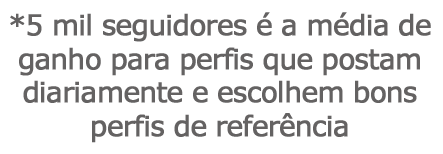
<style>
.page{position:relative;width:443px;height:154px;background:#ffffff}
.page>*{position:absolute;margin:0}
.t1{font:27.9px "Verdana";letter-spacing:-0.05em;color:#646262;font-weight:bold}
</style>
<div class="page">
<p class="t1" style="left:10px;top:12px;width:421px;height:131px;text-align:center">*5 mil seguidores é a média de <br>ganho para perfis que postam<br>diariamente e escolhem bons<br>perfis de referência</p>
</div>
